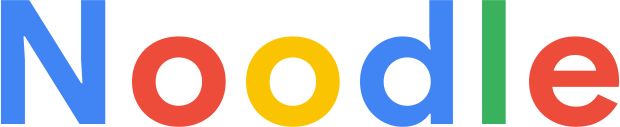
<style>
.page{position:relative;width:620px;height:127px;background:#ffffff}
.page>*{position:absolute;margin:0}
.t1{font:172.5px "ProductSans-Bold";letter-spacing:0.05em;color:#4185f4;scale:1.04 1}
.t2{font:172.5px "ProductSans-Bold";letter-spacing:0.05em;color:#ed4c3b;scale:1.04 1}
.t3{font:172.5px "ProductSans-Bold";letter-spacing:0.05em;color:#fbc403;scale:1.04 1}
.t4{font:172.5px "ProductSans-Bold";letter-spacing:0.05em;color:#3ab15c;scale:1.04 1}
</style>
<div class="page">
<p class="t1" style="left:0px;top:0px;width:620px;height:127px">N<span class="t2">o</span><span class="t3">o</span>d<span class="t4">l</span><span class="t2">e</span></p>
</div>
